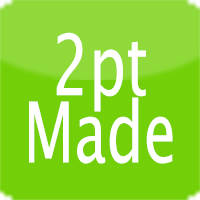
<style>
.page{position:relative;width:200px;height:200px;background:#73d008}
.page>*{position:absolute;margin:0}
.t1{font:84px "LucidaSansUnicode";color:#fffffd;scale:0.7 1}
</style>
<div class="page">
<p class="t1" style="left:29px;top:32px;width:144px;height:132px">2pt Made</p>
</div>
